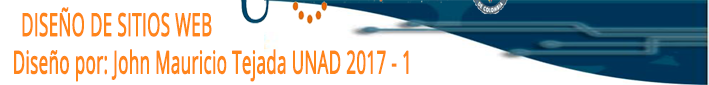
<style>
.page{position:relative;width:709px;height:85px;background:#ffffff}
.page>*{position:absolute;margin:0}
.t1{font:31.4px "OpenSans";color:#ff851b;font-weight:bold;scale:0.54 1}
</style>
<div class="page">
<p class="t1" style="left:14px;top:7px;width:395px;height:75px;text-align:right">DISEÑO DE SITIOS WEB<br>Diseño por: John Mauricio Tejada UNAD 2017 - 1</p>
</div>
